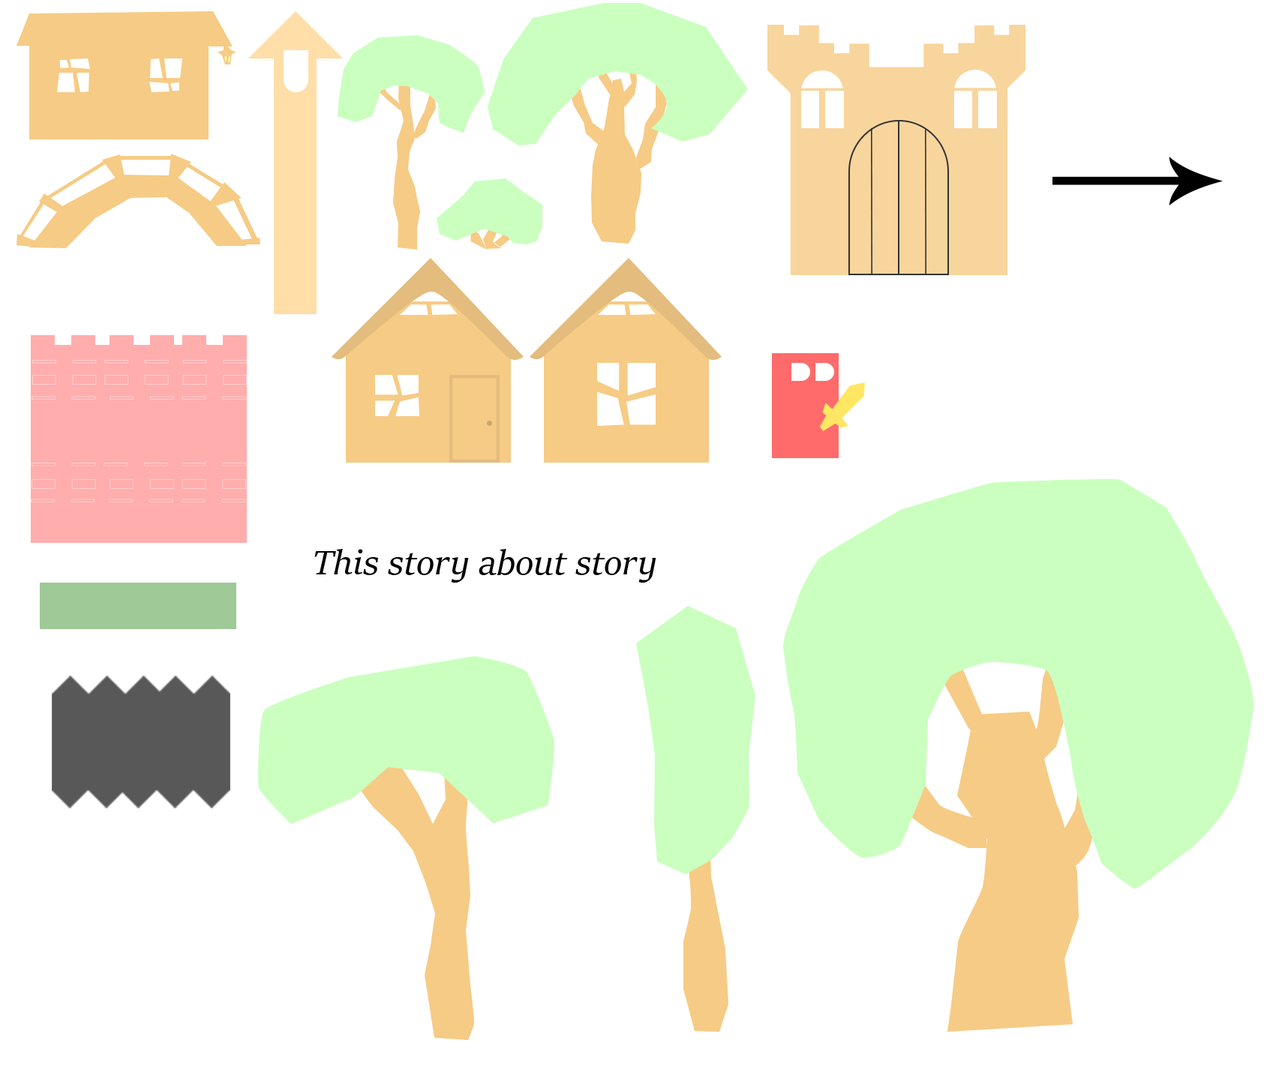
<style>
.page{position:relative;width:1273px;height:1085px;background:#ffffff}
.page>*{position:absolute;margin:0}
.t1{font:9px "SitkaHeading-Italic";color:#000000}
</style>
<div class="page">
<p class="t1" style="left:314px;top:549px;width:342px;height:34px">This story about story</p>
</div>
